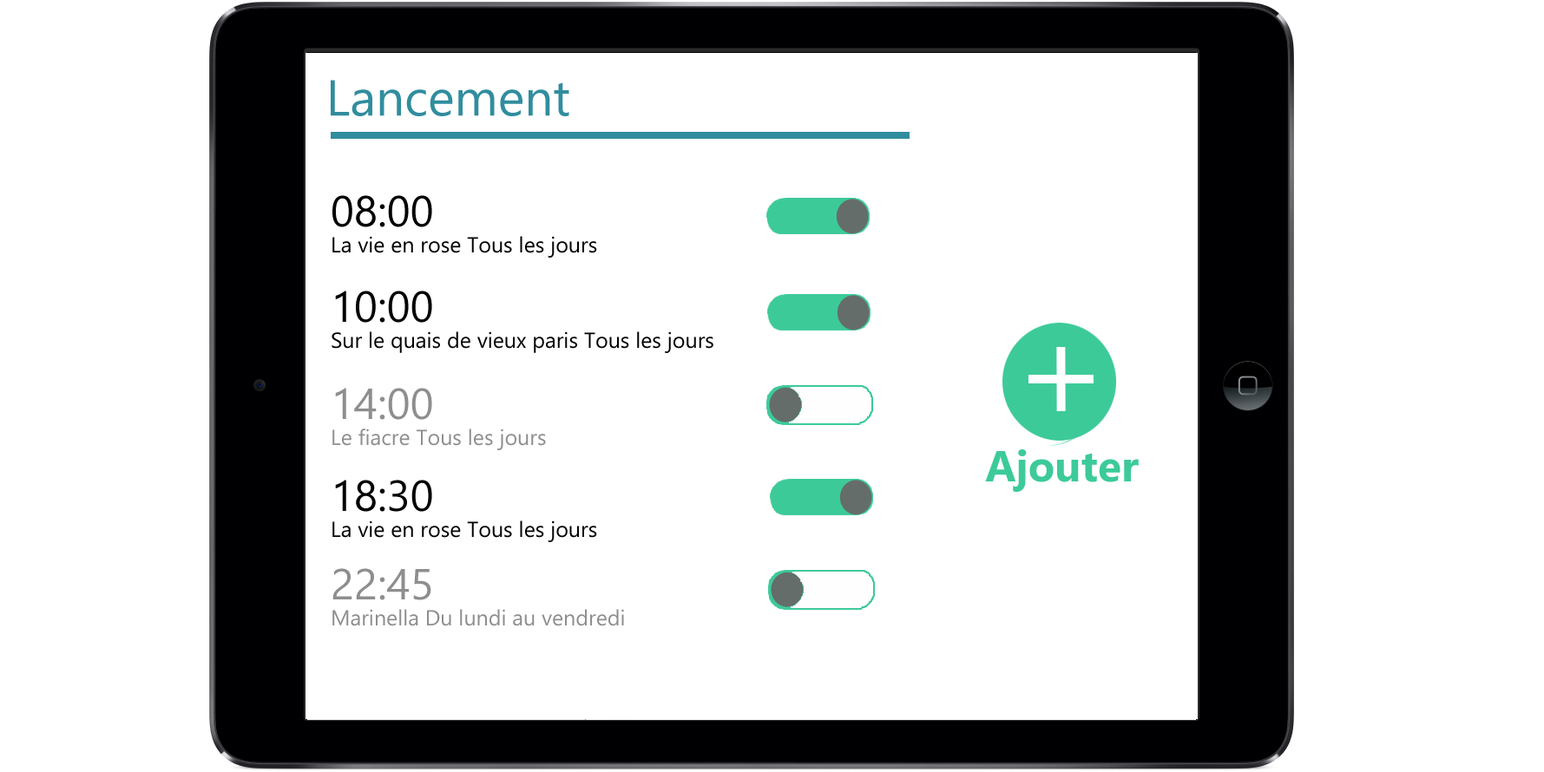
<style>
.page{position:relative;width:1544px;height:772px;background:#ffffff}
.page>*{position:absolute;margin:0}
.t1{font:21.7px "NirmalaUI";color:#020202}
.t2{font:43.4px "NirmalaUI";color:#020202}
.t3{font:21.7px "NirmalaUI";color:#8d8e8e}
.t4{font:43.4px "NirmalaUI";color:#8d8e8e}
.t5{font:43.4px "NirmalaUI-Bold";color:#3dca99}
</style>
<div class="page">
<p class="t1" style="left:332px;top:195px;width:265px;height:63px"><span class="t2">08:00<br></span>La vie en rose Tous les jours</p>
<p class="t1" style="left:332px;top:291px;width:381px;height:62px"><span class="t2">10:00<br></span>Sur le quais de vieux paris Tous les jours</p>
<p class="t3" style="left:332px;top:388px;width:214px;height:62px"><span class="t4">14:00<br></span>Le fiacre Tous les jours</p>
<p class="t5" style="left:985px;top:450px;width:154px;height:42px">Ajouter</p>
<p class="t1" style="left:332px;top:480px;width:265px;height:62px"><span class="t2">18:30<br></span>La vie en rose Tous les jours</p>
<p class="t3" style="left:332px;top:568px;width:292px;height:59px"><span class="t4">22:45<br></span>Marinella Du lundi au vendredi</p>
</div>
